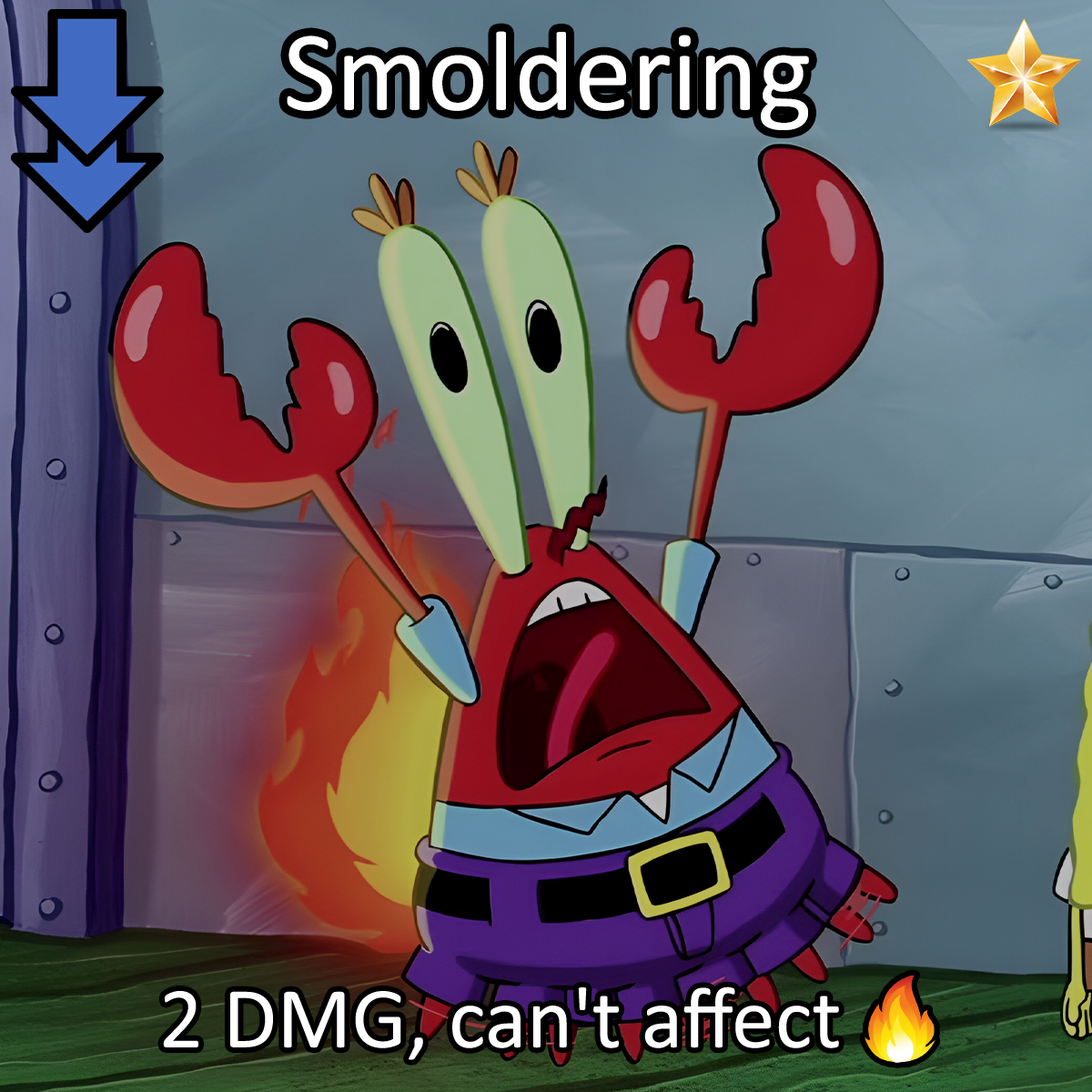
<style>
.page{position:relative;width:1092px;height:1092px}
.page>*{position:absolute;margin:0}
.t1{font:196.6px "Calibri";color:#ffffff}
.t2{font:150.1px "Calibri";color:#ffffff}
.t3{font:150.1px "stoogedings-Regular";color:#ffffff}
</style>
<div class="page">
<p class="t1" style="left:287px;top:31px;width:522px;height:99px">Smoldering</p>
<p class="t2" style="left:163px;top:975px;width:772px;height:88px">2 DMG, can't affect <span class="t3">[fire]</span></p>
</div>
